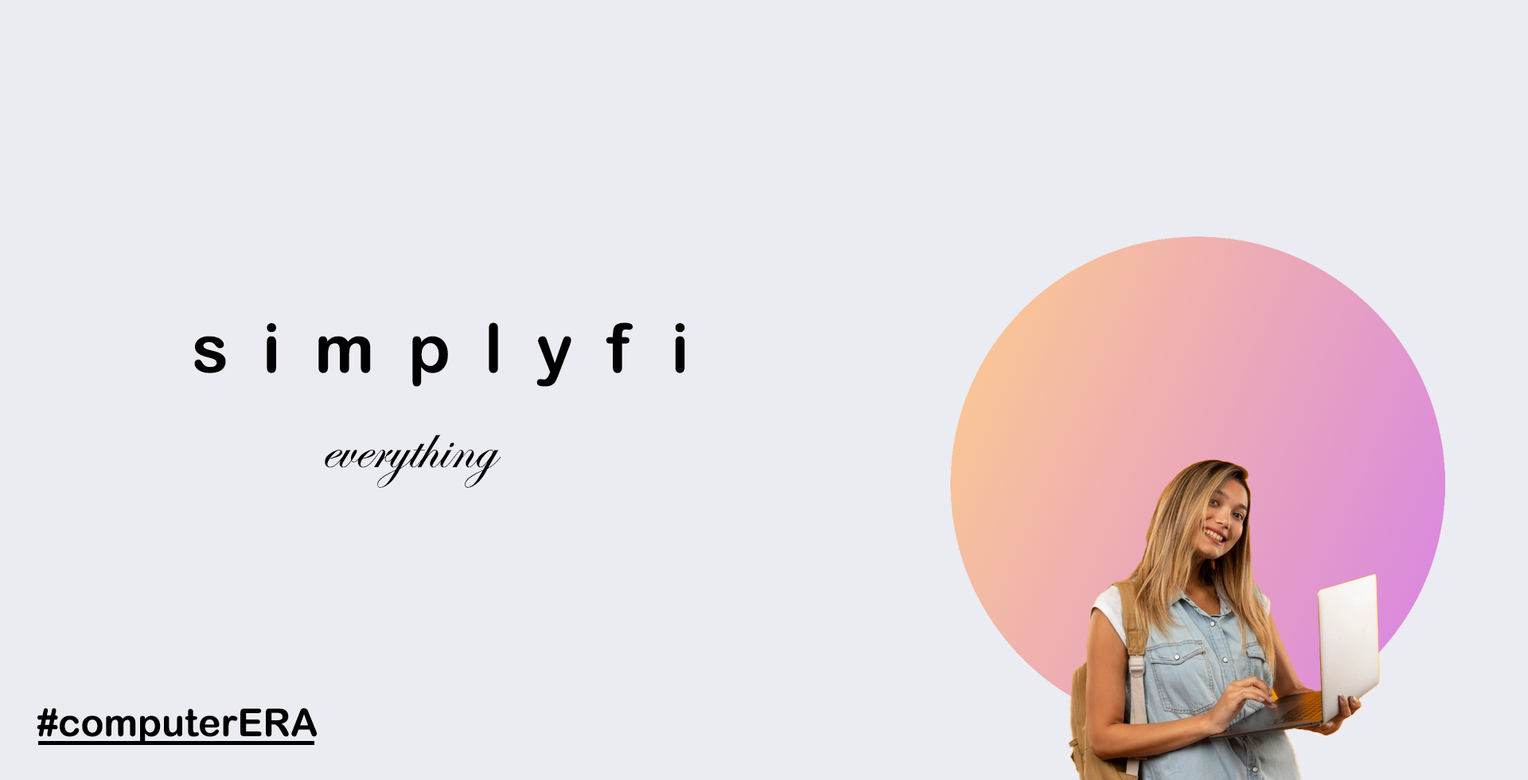
<style>
.page{position:relative;width:1528px;height:780px;background:#ebebf2}
.page>*{position:absolute;margin:0}
.t1{font:67.7px "ArialRoundedMTBold";color:#000001}
.t2{font:63.7px "EdwardianScriptITC";color:#000000}
.t3{font:38.2px "ArialRoundedMTBold";color:#000000}
</style>
<div class="page">
<p class="t1" style="left:194px;top:322px;width:491px;height:65px">s  i  m  p  l  y  f  i</p>
<p class="t2" style="left:325px;top:435px;width:177px;height:53px">everything</p>
<p class="t3" style="left:37px;top:708px;width:281px;height:36px">#computerERA</p>
</div>
